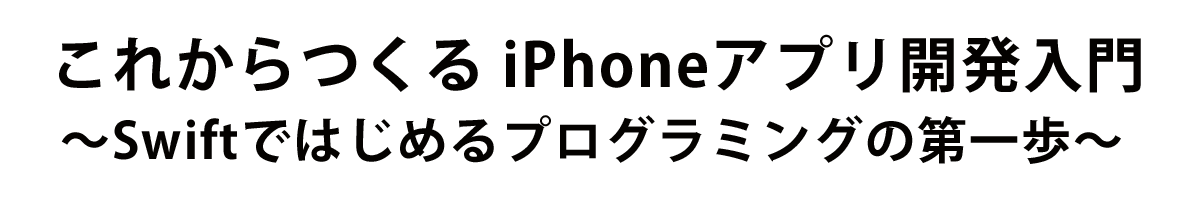
<style>
.page{position:relative;width:1200px;height:200px;background:#ffffff}
.page>*{position:absolute;margin:0}
.t1{font:60px "KozGoPr6N-Bold";letter-spacing:0.04em;color:#040200}
.t2{font:50px "KozGoPr6N-Bold";letter-spacing:0.04em;color:#040200}
</style>
<div class="page">
<p class="t1" style="left:59px;top:34px;width:1082px;height:59px">これからつくる iPhoneアプリ開発入門</p>
<p class="t2" style="left:61px;top:115px;width:1060px;height:49px">～Swiftではじめるプログラミングの第一歩～</p>
</div>
